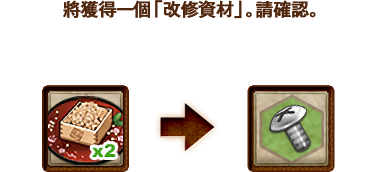
<style>
.page{position:relative;width:375px;height:172px;background:#ffffff}
.page>*{position:absolute;margin:0}
.t1{font:18px "GothicMB101Pr6N-Medium";letter-spacing:-0.04em;color:#50260d;font-weight:bold}
</style>
<div class="page">
<p class="t1" style="left:63px;top:0px;width:253px;height:19px">將獲得一個「改修資材」。請確認。</p>
</div>
